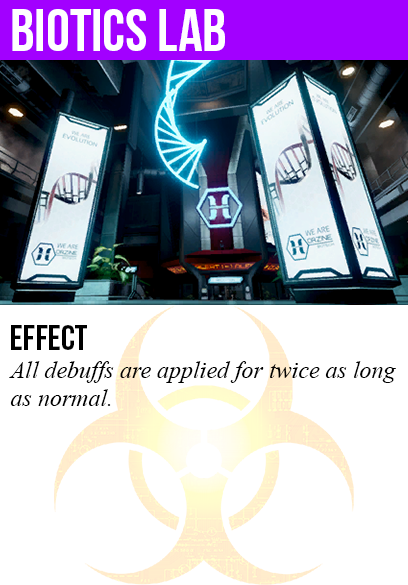
<style>
.page{position:relative;width:408px;height:585px;background:#ffffff}
.page>*{position:absolute;margin:0}
.t1{font:60px "BebasNeue";color:#ffffff}
.t2{font:36px "BebasNeue";color:#000000}
.t3{font:24px "TimesNewRomanPS-ItalicMT";color:#000000}
</style>
<div class="page">
<p class="t1" style="left:12px;top:9px;width:213px;height:42px">biotics lab</p>
<p class="t2" style="left:11px;top:325px;width:76px;height:25px">Effect</p>
<p class="t3" style="left:9px;top:361px;width:387px;height:45px">All debuffs are applied for twice as long<br>as normal.</p>
</div>
